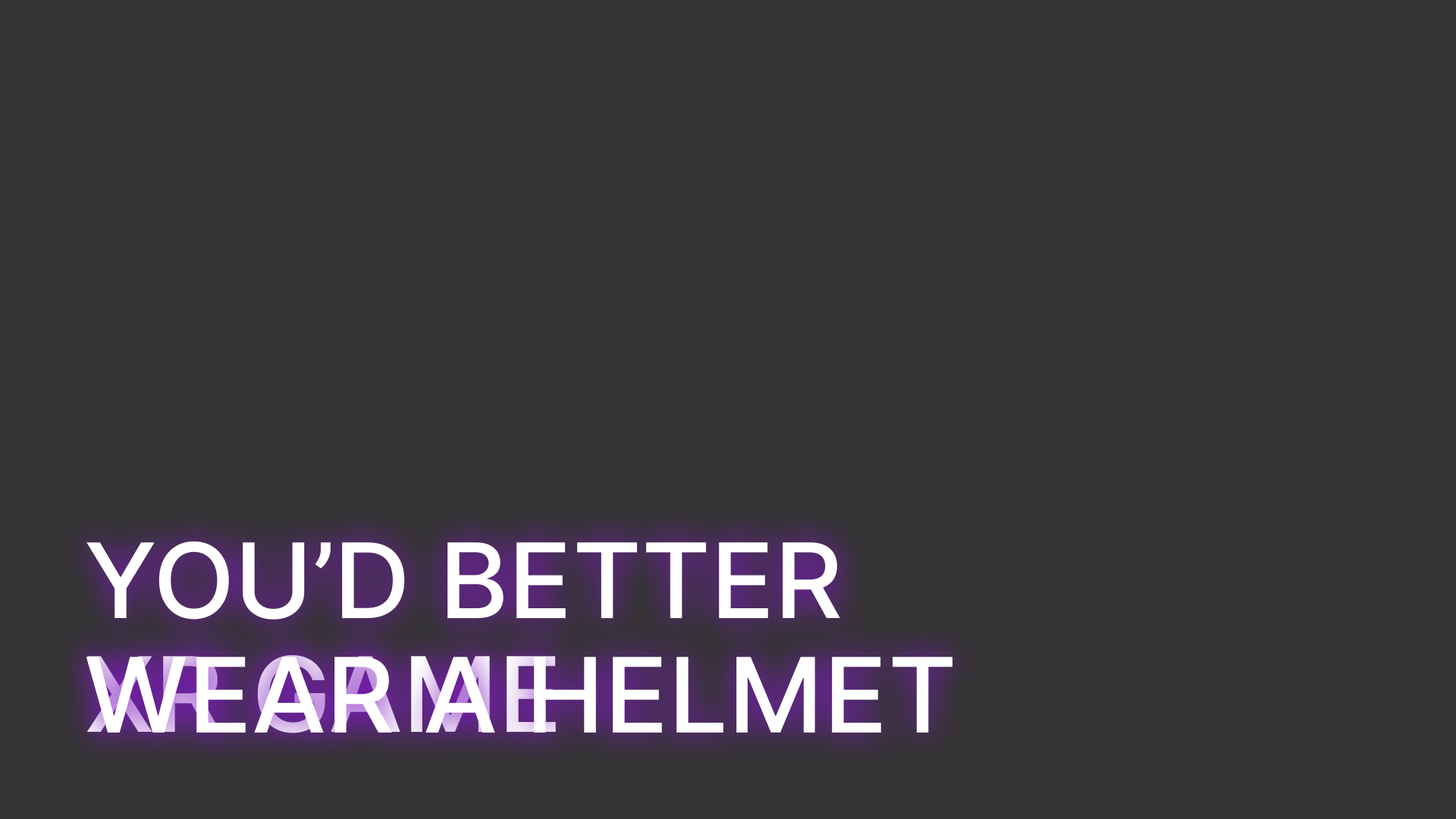
<style>
.page{position:relative;width:1456px;height:819px;background:#333333}
.page>*{position:absolute;margin:0}
.t1{font:104.1px/114.5px "Inter-Medium";color:#ffffff;text-transform:uppercase}
.t2{font:104.1px "Inter-Medium";text-transform:uppercase}
</style>
<div class="page">
<p class="t1" style="left:86px;top:541px;width:866px;height:192px">You’d better <br>wear a helmet</p>
<p class="t2" style="left:86px;top:655px;width:470px;height:78px">XR Game</p>
</div>
